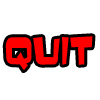
<style>
.page{position:relative;width:100px;height:100px;background:#ffffff}
.page>*{position:absolute;margin:0}
.t1{font:34px "Baveuse";color:#ff0000}
</style>
<div class="page">
<p class="t1" style="left:5px;top:36px;width:88px;height:35px">Quit</p>
</div>
